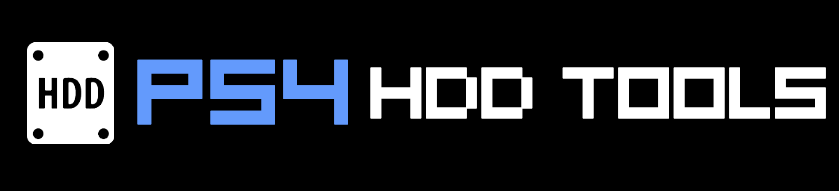
<style>
.page{position:relative;width:839px;height:191px;background:#000000}
.page>*{position:absolute;margin:0}
.t1{font:102px "RSMicro";color:#639afc;font-weight:bold}
.t2{font:80px "RSMicro";letter-spacing:-0.02em;color:#ffffff;font-weight:bold}
</style>
<div class="page">
<p class="t1" style="left:137px;top:59px;width:211px;height:66px">PS4</p>
<p class="t2" style="left:370px;top:67px;width:456px;height:52px">HDD tools</p>
</div>
